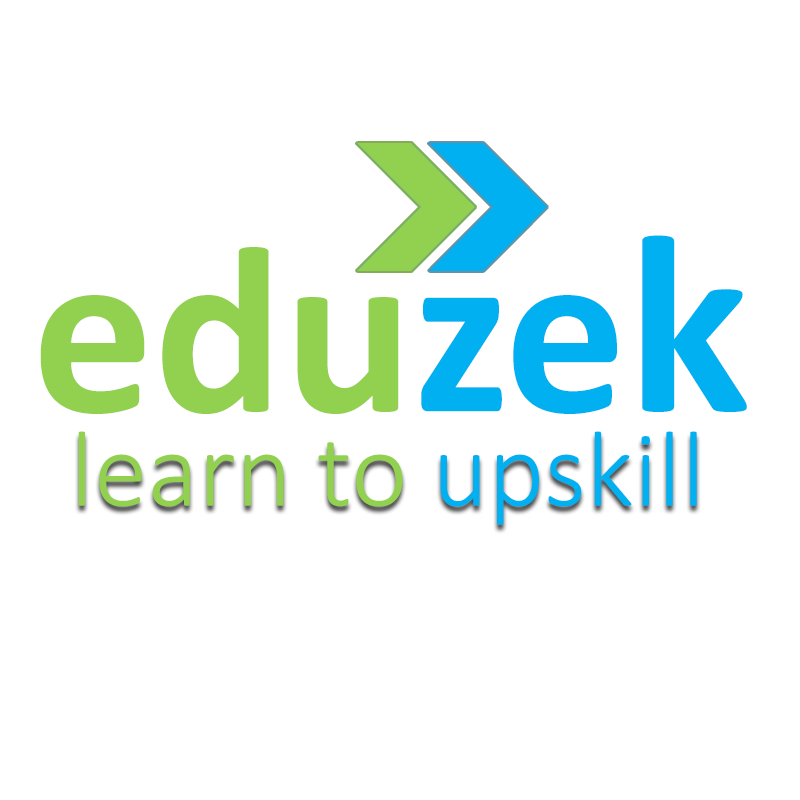
<style>
.page{position:relative;width:800px;height:800px;background:#ffffff}
.page>*{position:absolute;margin:0}
.t1{font:241.7px "Calibri-Bold";color:#92d050}
.t2{font:241.7px "Calibri-Bold";color:#00b0f0}
.t3{font:258.3px "Calibri-Bold";color:#00b0f0}
.t4{font:108.3px "Calibri-Light";color:#92d050}
.t5{font:108.3px "Calibri-Light";color:#00b0f0}
</style>
<div class="page">
<p class="t1" style="left:40px;top:235px;width:707px;height:179px">edu<span class="t2">ze</span><span class="t3">k</span></p>
<p class="t4" style="left:78px;top:431px;width:619px;height:94px">learn to <span class="t5">upskill</span></p>
</div>
